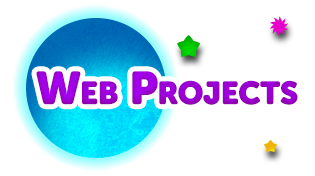
<style>
.page{position:relative;width:315px;height:176px;background:#ffffff}
.page>*{position:absolute;margin:0}
.t1{font:45.8px "MuseoSansRounded-1000";color:#9b01d3;font-variant:small-caps}
</style>
<div class="page">
<p class="t1" style="left:36px;top:71px;width:262px;height:34px">Web Projects</p>
</div>
